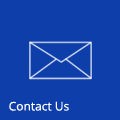
<style>
.page{position:relative;width:120px;height:120px;background:#0e3eaa}
.page>*{position:absolute;margin:0}
.t1{font:12px "OpenSans";color:#ffffff}
</style>
<div class="page">
<p class="t1" style="left:9px;top:101px;width:60px;height:10px">Contact Us</p>
</div>
